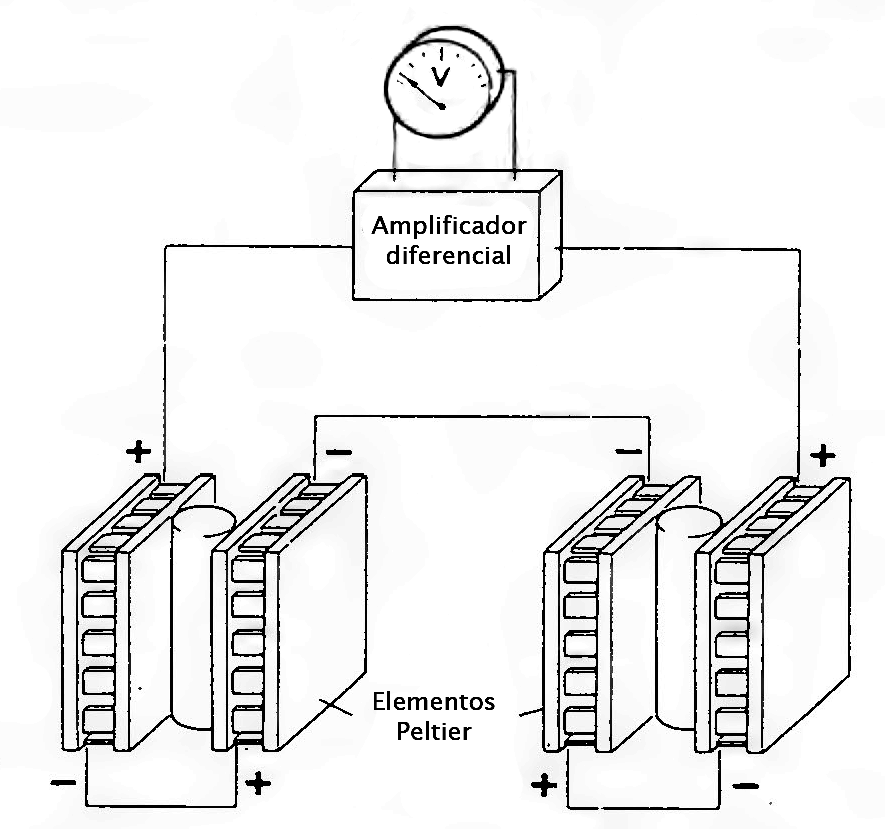
<style>
.page{position:relative;width:885px;height:829px;background:#ffffff}
.page>*{position:absolute;margin:0}
.t1{font:25px "LucidaSans";color:#000000}
</style>
<div class="page">
<p class="t1" style="left:371px;top:215px;width:156px;height:49px;text-align:center">Amplificador<br>diferencial</p>
<p class="t1" style="left:374px;top:691px;width:121px;height:49px;text-align:center">Elementos<br>Peltier</p>
</div>
